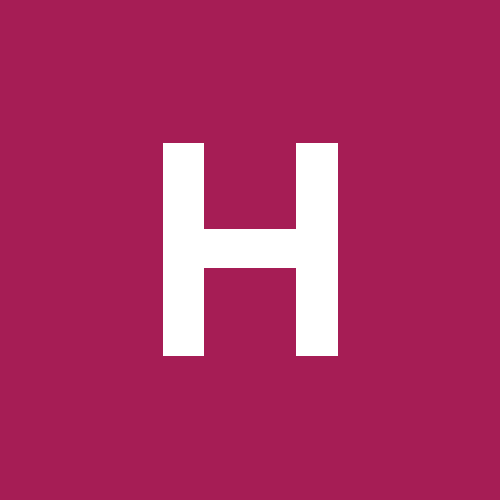
<style>
.page{position:relative;width:500px;height:500px;background:#a61d55}
.page>*{position:absolute;margin:0}
.t1{font:300px "CircularStd-Bold";color:#ffffff}
</style>
<div class="page">
<p class="t1" style="left:163px;top:143px;width:175px;height:213px">H</p>
</div>
